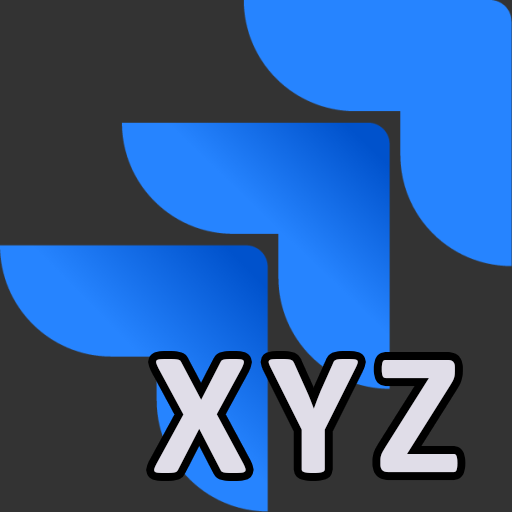
<style>
.page{position:relative;width:512px;height:512px;background:#333333}
.page>*{position:absolute;margin:0}
.t1{font:178px "Calibri-Bold";letter-spacing:0.1em;color:#e0dde8}
</style>
<div class="page">
<p class="t1" style="left:154px;top:359px;width:304px;height:114px">XYZ</p>
</div>
